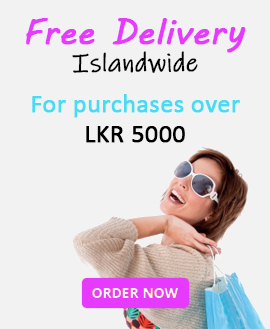
<style>
.page{position:relative;width:270px;height:329px;background:#f2f2f2}
.page>*{position:absolute;margin:0}
.t1{font:34.5px "MVBoli";color:#e63bff;font-weight:bold}
.t2{font:25.7px "InkFree";color:#000000;font-weight:bold}
.t3{font:25.7px "Calibri";color:#46dcf3;font-weight:bold}
.t4{font:25.7px "Calibri";color:#000000;font-weight:bold}
</style>
<div class="page">
<p class="t1" style="left:26px;top:18px;width:220px;height:35px">Free Delivery</p>
<p class="t2" style="left:72px;top:51px;width:126px;height:22px">Islandwide</p>
<p class="t3" style="left:32px;top:94px;width:208px;height:24px">For purchases over</p>
<p class="t4" style="left:86px;top:126px;width:99px;height:17px">LKR 5000</p>
</div>
